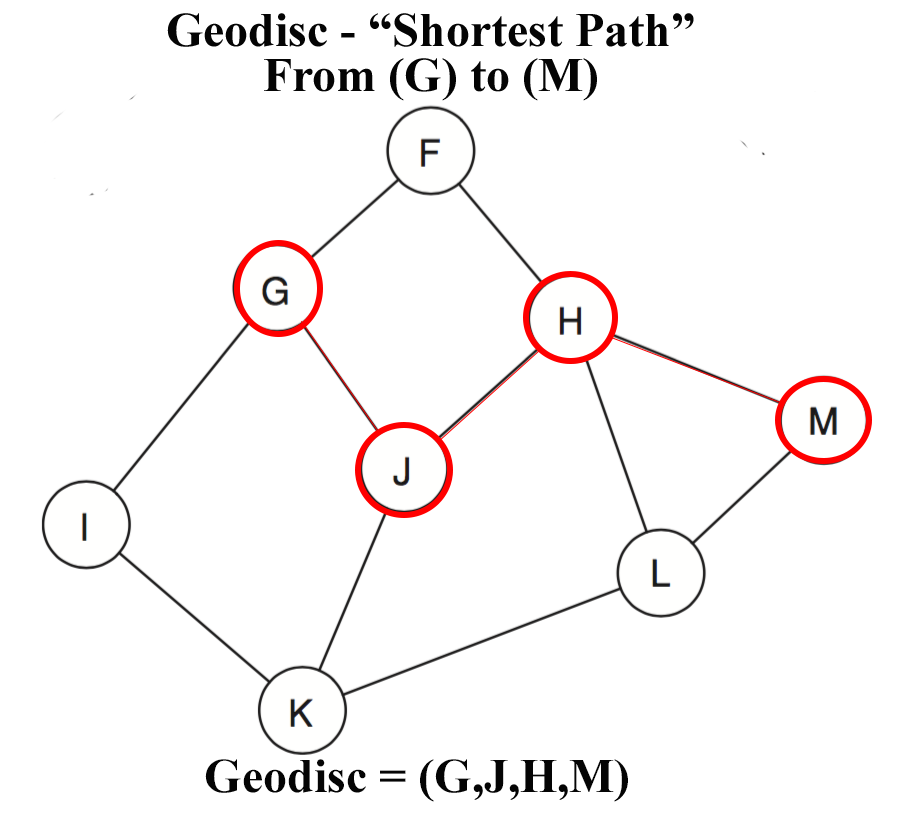
<style>
.page{position:relative;width:906px;height:818px;background:#ffffff}
.page>*{position:absolute;margin:0}
.t1{font:48px "TimesNewRomanPS-BoldMT";color:#040404}
</style>
<div class="page">
<p class="t1" style="left:167px;top:13px;width:527px;height:34px">Geodisc - “Shortest Path”</p>
<p class="t1" style="left:264px;top:58px;width:333px;height:43px">From (G) to (M)</p>
<p class="t1" style="left:205px;top:759px;width:423px;height:43px">Geodisc = (G,J,H,M)</p>
</div>
